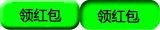
<style>
.page{position:relative;width:160px;height:30px;background:#00ff00}
.page>*{position:absolute;margin:0}
.t1{font:14px "MicrosoftYaHei";color:#000000}
</style>
<div class="page">
<p class="t1" style="left:19px;top:8px;width:43px;height:15px">领红包</p>
<p class="t1" style="left:97px;top:9px;width:43px;height:15px">领红包</p>
</div>
